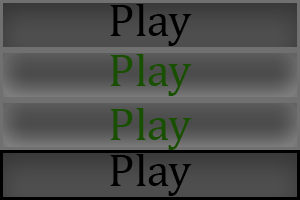
<style>
.page{position:relative;width:300px;height:200px}
.page>*{position:absolute;margin:0}
.t1{font:45.8px "CambriaMath";color:#000000}
.t2{font:45.8px "CambriaMath";color:#195000}
</style>
<div class="page">
<p class="t1" style="left:110px;top:4px;width:82px;height:42px">Play</p>
<p class="t2" style="left:110px;top:54px;width:82px;height:42px">Play</p>
<p class="t2" style="left:110px;top:108px;width:82px;height:42px">Play</p>
<p class="t1" style="left:110px;top:154px;width:82px;height:42px">Play</p>
</div>
